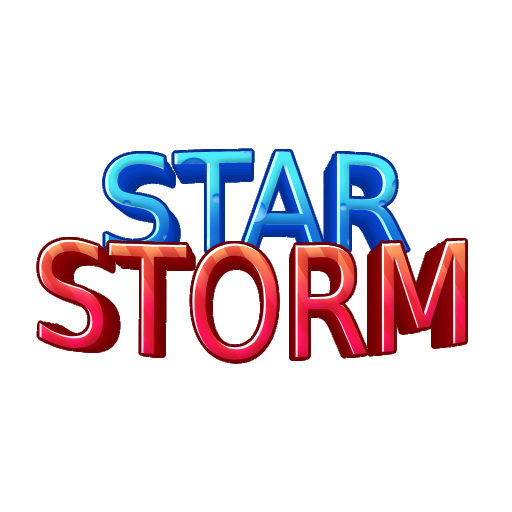
<style>
.page{position:relative;width:512px;height:512px;background:#ffffff}
.page>*{position:absolute;margin:0}
.t1{font:113px "Foo-Regular";letter-spacing:-0.01em}
.t2{font:110.7px "Foo-Regular";letter-spacing:-0.01em}
.t3{font:137.5px "Foo-Regular";letter-spacing:-0.005em;scale:0.91 1}
.t4{font:132.1px "Foo-Regular";letter-spacing:-0.005em;scale:0.91 1}
.t5{font:129.4px "Foo-Regular";letter-spacing:-0.005em;scale:0.91 1}
.t6{font:126.8px "Foo-Regular";letter-spacing:-0.005em;scale:0.91 1}
.t7{font:124.3px "Foo-Regular";letter-spacing:-0.005em;scale:0.91 1}
</style>
<div class="page">
<p class="t1" style="left:118px;top:166px;width:275px;height:92px">STAR</p>
<p class="t2" style="left:121px;top:169px;width:269px;height:90px">STAR</p>
<p class="t3" style="left:39px;top:239px;width:427px;height:121px">STORM</p>
<p class="t4" style="left:47px;top:244px;width:410px;height:116px">STORM</p>
<p class="t5" style="left:51px;top:247px;width:402px;height:114px">STORM</p>
<p class="t6" style="left:55px;top:249px;width:394px;height:112px">STORM</p>
<p class="t7" style="left:59px;top:252px;width:386px;height:109px">STORM</p>
</div>
